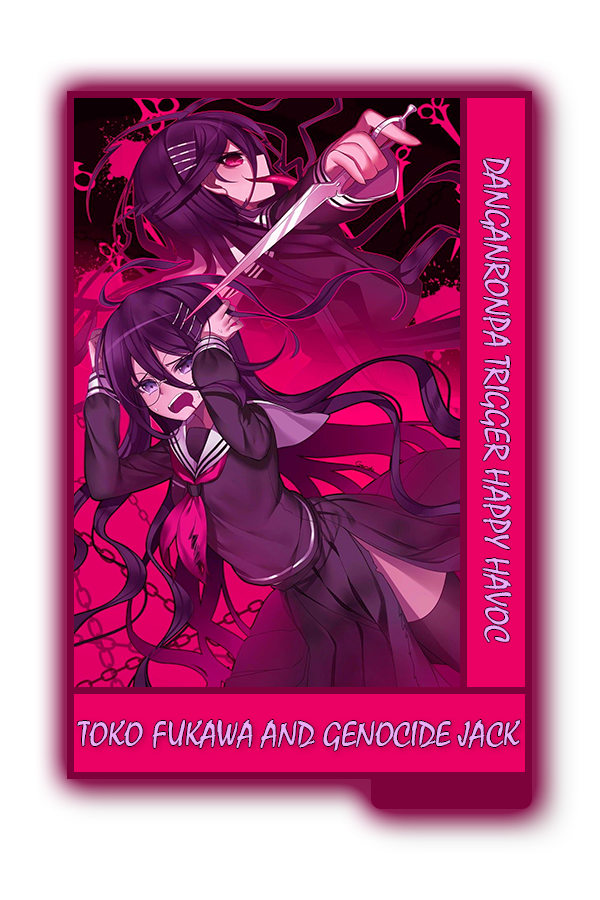
<style>
.page{position:relative;width:600px;height:900px;background:#ffffff}
.page>*{position:absolute;margin:0}
.t1{font:36.1px "Mistral";color:#e2baef}
.t2{font:35.7px "Mistral";color:#e2baef}
</style>
<div class="page">
<p class="t1" style="left:479px;top:158px;width:33px;height:484px;rotate:90deg">DANGANRONPA TRIGGER HAPPY HAVOC</p>
<p class="t2" style="left:77px;top:720px;width:443px;height:31px">TOKO FUKAWA AND GENOCIDE JACK</p>
</div>
